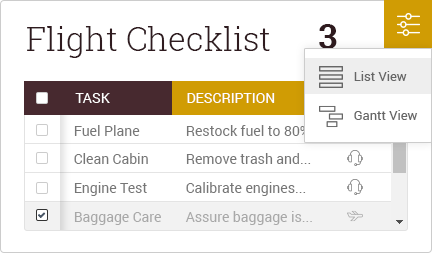
<style>
.page{position:relative;width:432px;height:253px;background:#ffffff}
.page>*{position:absolute;margin:0}
.t1{font:33px "RobotoSlab-Light";color:#2f1b1f}
.t2{font:35.1px "Roboto-Bold";color:#2f1b1f}
.t3{font:13px "Roboto-Regular";color:#666666}
.t4{font:14px "Roboto-Regular";color:#ffffff;text-transform:uppercase}
.t5{font:14px "Roboto-Regular";color:#767676}
.t6{font:14px "Roboto-Regular";color:#a8a8a8}
</style>
<div class="page">
<p class="t1" style="left:27px;top:26px;width:243px;height:32px">Flight Checklist</p>
<p class="t2" style="left:319px;top:24px;width:18px;height:25px">3</p>
<p class="t3" style="left:354px;top:71px;width:53px;height:10px">List View</p>
<p class="t4" style="left:75px;top:93px;width:35px;height:10px">Task</p>
<p class="t4" style="left:187px;top:93px;width:88px;height:10px">Description</p>
<p class="t3" style="left:354px;top:110px;width:64px;height:10px">Gantt View</p>
<p class="t5" style="left:74px;top:125px;width:66px;height:11px">Fuel Plane</p>
<p class="t5" style="left:186px;top:125px;width:124px;height:11px">Restock fuel to 80%</p>
<p class="t5" style="left:74px;top:153px;width:74px;height:11px">Clean Cabin</p>
<p class="t5" style="left:186px;top:153px;width:125px;height:11px">Remove trash and...</p>
<p class="t5" style="left:74px;top:182px;width:73px;height:14px">Engine Test</p>
<p class="t5" style="left:186px;top:182px;width:120px;height:14px">Calibrate engines...</p>
<p class="t6" style="left:74px;top:212px;width:87px;height:13px">Baggage Care</p>
<p class="t6" style="left:185px;top:211px;width:127px;height:14px">Assure baggage is...</p>
</div>
